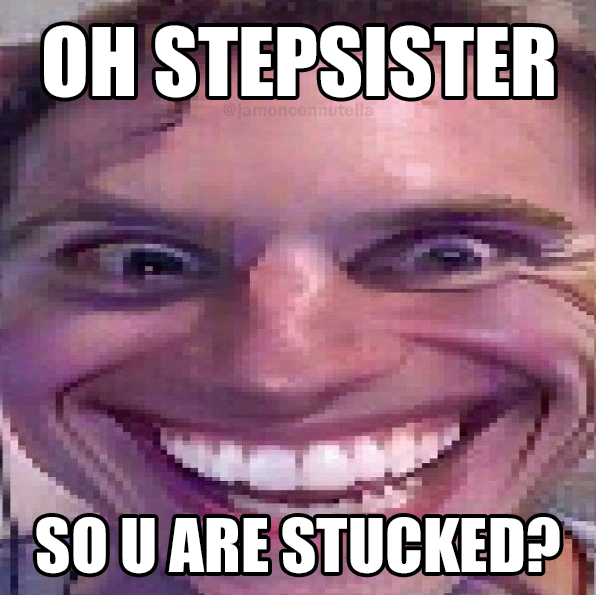
<style>
.page{position:relative;width:596px;height:595px}
.page>*{position:absolute;margin:0}
.t1{font:87.3px "Impact";color:#ffffff}
.t2{font:18.7px "FranklinGothic-Demi";color:#bf878f}
.t3{font:68.2px "Impact";color:#ffffff}
</style>
<div class="page">
<p class="t1" style="left:44px;top:25px;width:510px;height:73px">OH STEPSISTER</p>
<p class="t2" style="left:223px;top:103px;width:151px;height:17px">@jamonconnutella</p>
<p class="t3" style="left:36px;top:517px;width:524px;height:57px">SO U ARE STUCKED?</p>
</div>
